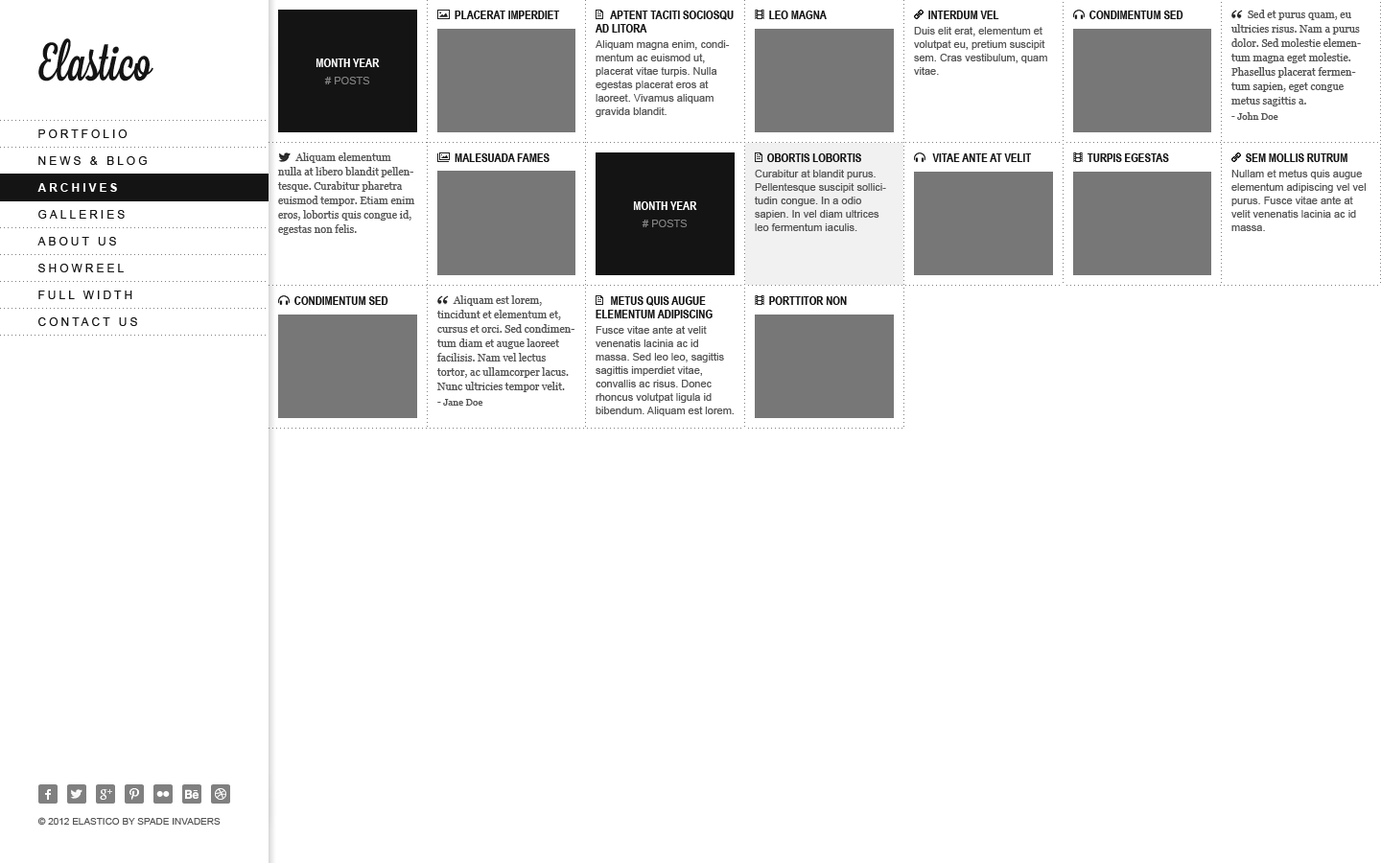
<style>
.page{position:relative;width:1381px;height:863px;background:#ffffff}
.page>*{position:absolute;margin:0}
.t1{font:11.5px "ArialNarrow-Bold";color:#141414;text-transform:uppercase}
.t2{font:11.5px/13.4px "ArialNarrow-Bold";color:#141414;text-transform:uppercase}
.t3{font:10.6px/14.4px "Georgia";color:#555555}
.t4{font:10.6px/14.4px "Georgia";letter-spacing:0.015em;color:#555555}
.t5{font:10.6px/13.4px "ArialMT";color:#555555}
.t6{font:11.5px/17.3px "ArialNarrow-Bold";color:#ffffff;text-transform:uppercase}
.t7{font:10.6px/17.3px "ArialMT";color:#808080;text-transform:uppercase}
.t8{font:9.6px "Georgia";color:#555555}
.t9{font:11.5px "ArialMT";letter-spacing:0.25em;color:#141414;text-transform:uppercase}
.t10{font:10.6px/14.4px "Georgia";letter-spacing:0.04em;color:#555555}
.t11{font:11.5px "Arial-BoldMT";letter-spacing:0.25em;color:#ffffff;text-transform:uppercase}
.t12{font:9.6px "ArialMT";color:#555555;text-transform:uppercase}
</style>
<div class="page">
<p class="t1" style="left:455px;top:11px;width:105px;height:8px">placerat imperdiet</p>
<p class="t2" style="left:596px;top:11px;width:138px;height:22px">Aptent taciti sociosqu ad litora</p>
<p class="t1" style="left:769px;top:11px;width:58px;height:8px">leo magna</p>
<p class="t1" style="left:929px;top:11px;width:70px;height:8px">interdum vel</p>
<p class="t1" style="left:1090px;top:11px;width:94px;height:8px">condimentum sed lorem</p>
<p class="t3" style="left:1231px;top:10px;width:130px;height:96px"><span class="t4">      </span>Sed et purus quam, eu ultricies risus. Nam a purus dolor. Sed molestie elementum magna eget molestie. Phasellus placerat fermentum sapien, eget congue metus sagittis a.</p>
<p class="t5" style="left:914px;top:27px;width:133px;height:48px">Duis elit erat, elementum et volutpat eu, pretium suscipit sem. Cras vestibulum, quam vitae.</p>
<p class="t5" style="left:596px;top:40px;width:134px;height:77px">Aliquam magna enim, condimentum ac euismod ut, placerat vitae turpis. Nulla egestas placerat eros at laoreet. Vivamus aliquam gravida blandit.</p>
<p class="t6" style="left:316px;top:59px;width:64px;height:25px;text-align:center">month year<br><span class="t7"># posts</span></p>
<p class="t8" style="left:1232px;top:112px;width:47px;height:8px">- John Doe</p>
<p class="t9" style="left:38px;top:129px;width:90px;height:9px">portfolio</p>
<p class="t9" style="left:38px;top:156px;width:109px;height:9px">news &amp; blog</p>
<p class="t3" style="left:277px;top:153px;width:138px;height:82px"><span class="t10">      </span>Aliquam elementum nulla at libero blandit pellentesque. Curabitur pharetra euismod tempor. Etiam enim eros, lobortis quis congue id, egestas non felis.</p>
<p class="t1" style="left:455px;top:153px;width:95px;height:9px">malesuada fames</p>
<p class="t1" style="left:767px;top:153px;width:94px;height:9px">obortis lobortis</p>
<p class="t1" style="left:932px;top:153px;width:100px;height:9px">vitae ante at velit</p>
<p class="t1" style="left:1087px;top:153px;width:82px;height:9px">turpis egestas</p>
<p class="t1" style="left:1246px;top:153px;width:102px;height:9px">sem mollis rutrum</p>
<p class="t5" style="left:755px;top:170px;width:131px;height:61px">Curabitur at blandit purus. Pellentesque suscipit sollicitudin congue. In a odio sapien. In vel diam ultrices leo fermentum iaculis.</p>
<p class="t5" style="left:1232px;top:170px;width:134px;height:61px">Nullam et metus quis augue elementum adipiscing vel vel purus. Fusce vitae ante at velit venenatis lacinia ac id massa.</p>
<p class="t11" style="left:37px;top:183px;width:80px;height:9px">archives</p>
<p class="t6" style="left:633px;top:201px;width:64px;height:26px;text-align:center">month year<br><span class="t7"># posts</span></p>
<p class="t9" style="left:38px;top:210px;width:87px;height:9px">galleries</p>
<p class="t9" style="left:37px;top:237px;width:79px;height:9px">about us</p>
<p class="t9" style="left:38px;top:264px;width:86px;height:8px">showreel</p>
<p class="t9" style="left:38px;top:291px;width:94px;height:8px">full width</p>
<p class="t1" style="left:294px;top:296px;width:94px;height:9px">condimentum sed lorem</p>
<p class="t3" style="left:436px;top:295px;width:139px;height:97px"><span class="t4">      </span>Aliquam est lorem, tincidunt et elementum et, cursus et orci. Sed condimentum diam et augue laoreet facilisis. Nam vel lectus tortor, ac ullamcorper lacus. Nunc ultricies tempor velit.</p>
<p class="t2" style="left:596px;top:296px;width:117px;height:22px">metus quis augue elementum adipiscing</p>
<p class="t1" style="left:769px;top:296px;width:78px;height:9px">porttitor non</p>
<p class="t9" style="left:38px;top:317px;width:99px;height:9px">contact us</p>
<p class="t5" style="left:596px;top:326px;width:138px;height:90px">Fusce vitae ante at velit venenatis lacinia ac id massa. Sed leo leo, sagittis sagittis imperdiet vitae, convallis ac risus. Donec rhoncus volutpat ligula id bibendum. Aliquam est lorem.</p>
<p class="t8" style="left:437px;top:399px;width:46px;height:7px">- Jane Doe</p>
<p class="t12" style="left:37px;top:817px;width:184px;height:9px">© 2012 elastico by spade invaders</p>
</div>
